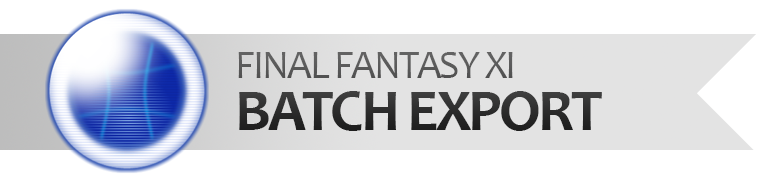
<style>
.page{position:relative;width:762px;height:181px;background:#ffffff}
.page>*{position:absolute;margin:0}
.t1{font:40.2px/51.6px "Candara";letter-spacing:-0.05em;color:#333333}
.t2{font:60.3px/51.6px "Candara-Bold";letter-spacing:-0.05em;color:#333333}
</style>
<div class="page">
<p class="t1" style="left:238px;top:52px;width:364px;height:79px">FINAL FANTASY XI<br><span class="t2">BATCH EXPORT</span></p>
</div>
